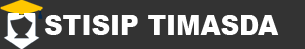
<style>
.page{position:relative;width:305px;height:49px;background:#333333}
.page>*{position:absolute;margin:0}
.t1{font:27.5px "Arial-Black";color:#ffffff;scale:0.94 1}
</style>
<div class="page">
<p class="t1" style="left:44px;top:15px;width:235px;height:20px">STISIP TIMASDA</p>
</div>
